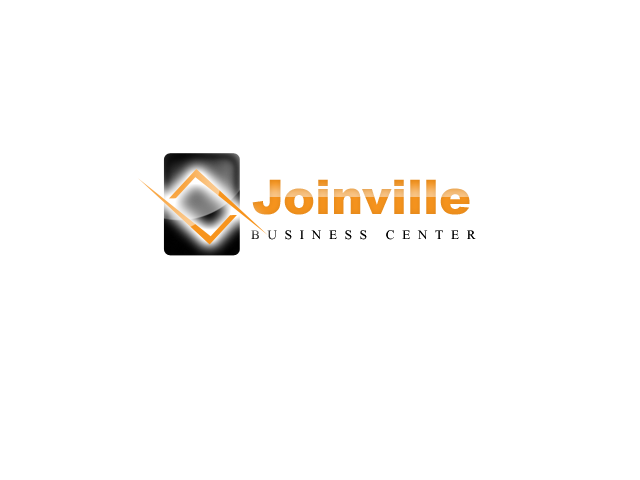
<style>
.page{position:relative;width:640px;height:480px;background:#ffffff}
.page>*{position:absolute;margin:0}
.t1{font:48px "Arial-Black";color:#f7941d}
.t2{font:13px "TimesNewRomanPSMT";letter-spacing:0.6em;color:#000000}
</style>
<div class="page">
<p class="t1" style="left:252px;top:179px;width:218px;height:36px">Joinville</p>
<p class="t2" style="left:251px;top:230px;width:225px;height:10px">BUSINESS CENTER</p>
</div>
